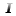
<style>
.page{position:relative;width:16px;height:16px;background:#ffffff}
.page>*{position:absolute;margin:0}
.t1{font:14px "Tahoma-Bold";font-style:italic}
</style>
<div class="page">
<p class="t1" style="left:5px;top:3px;width:8px;height:10px">I</p>
</div>
